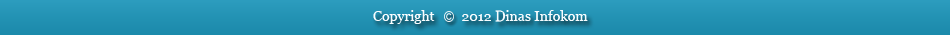
<style>
.page{position:relative;width:950px;height:35px}
.page>*{position:absolute;margin:0}
.t1{font:14px "Georgia";color:#f9fdff}
</style>
<div class="page">
<p class="t1" style="left:373px;top:10px;width:215px;height:14px">Copyright        2012 Dinas Infokom</p>
</div>
